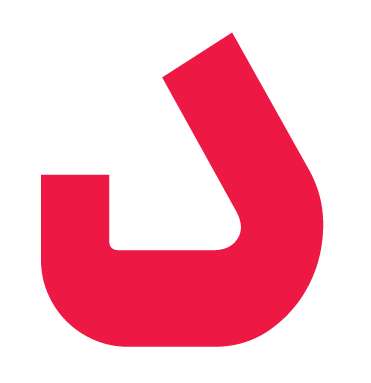
<style>
.page{position:relative;width:371px;height:383px;background:#ffffff}
.page>*{position:absolute;margin:0}
.t1{font:566.7px "Peyda-Black";color:#ed1944}
</style>
<div class="page">
<p class="t1" style="left:41px;top:32px;width:283px;height:315px">د</p>
</div>
